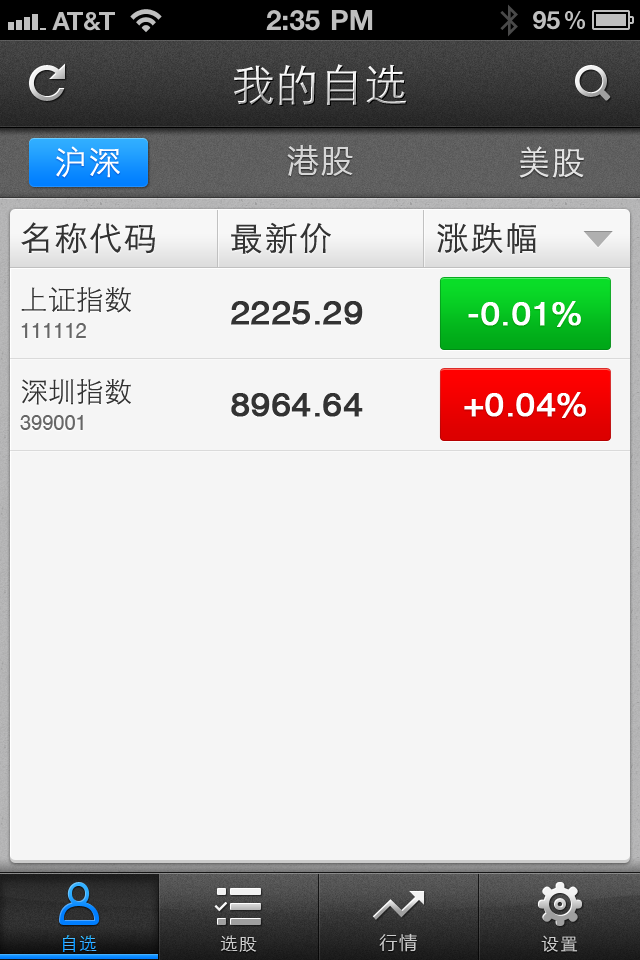
<style>
.page{position:relative;width:640px;height:960px;background:#f5f5f5}
.page>*{position:absolute;margin:0}
.t1{font:44px "STXihei";letter-spacing:0.005em}
.t2{font:33px "STXihei";letter-spacing:0.05em;color:#ffffff}
.t3{font:32px "MicrosoftYaHei";letter-spacing:0.05em;color:#d6d6d6}
.t4{font:33px "STXihei";letter-spacing:0.05em;color:#e3e3e3}
.t5{font:33px "STXihei";letter-spacing:0.05em;color:#333333}
.t6{font:28px "STXihei";color:#333333}
.t7{font:33.2px "HelveticaCE-Regular";color:#333333;font-weight:bold;scale:1.05 1}
.t8{font:33.2px "HelveticaCE-Regular";color:#ffffff;font-weight:bold;scale:1.05 1}
.t9{font:20px "HelveticaCE-Regular";color:#5c6370}
.t10{font:18px "STXihei";letter-spacing:0.05em}
.t11{font:18px "STXihei";letter-spacing:0.05em;color:#cccccc}
.t12{font:18px "MicrosoftYaHei";letter-spacing:0.1em;color:#cccccc}
</style>
<div class="page">
<p class="t1" style="left:234px;top:64px;width:173px;height:41px">我的自选</p>
<p class="t2" style="left:56px;top:146px;width:64px;height:32px">沪深</p>
<p class="t3" style="left:287px;top:145px;width:66px;height:31px">港股</p>
<p class="t4" style="left:519px;top:146px;width:65px;height:32px">美股</p>
<p class="t5" style="left:21px;top:222px;width:134px;height:32px">名称代码</p>
<p class="t5" style="left:231px;top:222px;width:100px;height:32px">最新价</p>
<p class="t5" style="left:437px;top:223px;width:99px;height:31px">涨跌幅</p>
<p class="t6" style="left:21px;top:287px;width:110px;height:26px">上证指数</p>
<p class="t7" style="left:231px;top:301px;width:132px;height:24px">2225.29</p>
<p class="t8" style="left:468px;top:301px;width:113px;height:26px">-0.01%</p>
<p class="t9" style="left:21px;top:323px;width:65px;height:15px">111112</p>
<p class="t6" style="left:21px;top:379px;width:110px;height:26px">深圳指数</p>
<p class="t7" style="left:231px;top:393px;width:132px;height:24px">8964.64</p>
<p class="t8" style="left:464px;top:392px;width:122px;height:26px">+0.04%</p>
<p class="t9" style="left:20px;top:415px;width:63px;height:15px">399001</p>
<p class="t10" style="left:62px;top:935px;width:35px;height:17px">自选</p>
<p class="t11" style="left:220px;top:935px;width:37px;height:17px">选股</p>
<p class="t12" style="left:379px;top:933px;width:38px;height:19px">行情</p>
<p class="t11" style="left:541px;top:935px;width:37px;height:17px">设置</p>
</div>
